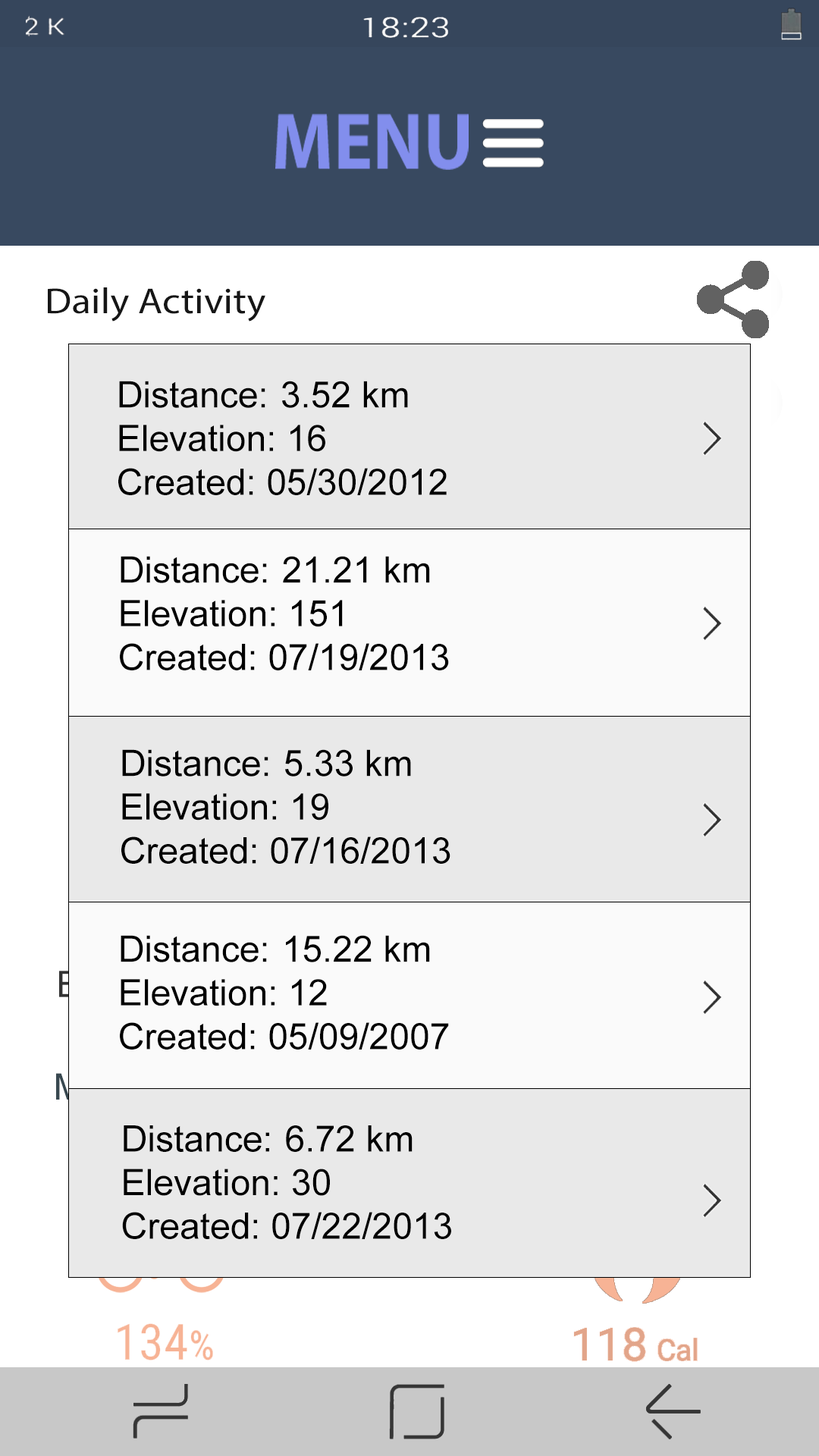
<style>
.page{position:relative;width:819px;height:1456px;background:#e9e9e9}
.page>*{position:absolute;margin:0}
.t1{font:36.4px "ArialMT";color:#000000}
</style>
<div class="page">
<p class="t1" style="left:118px;top:381px;width:329px;height:114px">Distance: 3.52 km<br>Elevation: 16<br>Created: 05/30/2012</p>
<p class="t1" style="left:120px;top:556px;width:329px;height:114px">Distance: 21.21 km<br>Elevation: 151<br>Created: 07/19/2013</p>
<p class="t1" style="left:121px;top:749px;width:329px;height:115px">Distance: 5.33 km<br>Elevation: 19<br>Created: 07/16/2013</p>
<p class="t1" style="left:120px;top:935px;width:329px;height:115px">Distance: 15.22 km<br>Elevation: 12<br>Created: 05/09/2007</p>
<p class="t1" style="left:122px;top:1125px;width:329px;height:114px">Distance: 6.72 km<br>Elevation: 30<br>Created: 07/22/2013</p>
</div>
